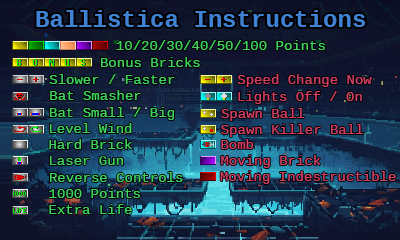
<style>
.page{position:relative;width:400px;height:240px}
.page>*{position:absolute;margin:0}
.t1{font:24px "LiterationMonoPowerline-Bold";color:#3f81d2}
.t2{font:14px "LiterationMonoPowerline";color:#3fd25e}
.t3{font:14px "LiterationMonoPowerline";color:#d23f65}
</style>
<div class="page">
<p class="t1" style="left:36px;top:10px;width:329px;height:17px">Ballistica Instructions</p>
<p class="t2" style="left:116px;top:40px;width:209px;height:10px">10/20/30/40/50/100 Points</p>
<p class="t2" style="left:101px;top:57px;width:99px;height:10px">Bonus Bricks</p>
<p class="t2" style="left:49px;top:74px;width:126px;height:10px">Slower / Faster</p>
<p class="t3" style="left:237px;top:74px;width:135px;height:13px">Speed Change Now</p>
<p class="t2" style="left:50px;top:90px;width:91px;height:10px">Bat Smasher</p>
<p class="t3" style="left:238px;top:91px;width:124px;height:13px">Lights Off / On</p>
<p class="t2" style="left:50px;top:107px;width:125px;height:13px">Bat Small / Big</p>
<p class="t3" style="left:221px;top:108px;width:84px;height:13px">Spawn Ball</p>
<p class="t2" style="left:50px;top:123px;width:82px;height:10px">Level Wind</p>
<p class="t3" style="left:221px;top:124px;width:142px;height:13px">Spawn Killer Ball</p>
<p class="t2" style="left:49px;top:139px;width:83px;height:10px">Hard Brick</p>
<p class="t3" style="left:221px;top:139px;width:33px;height:10px">Bomb</p>
<p class="t2" style="left:50px;top:156px;width:73px;height:9px">Laser Gun</p>
<p class="t3" style="left:221px;top:155px;width:100px;height:13px">Moving Brick</p>
<p class="t2" style="left:50px;top:172px;width:133px;height:10px">Reverse Controls</p>
<p class="t3" style="left:220px;top:171px;width:176px;height:13px">Moving Indestructible</p>
<p class="t2" style="left:49px;top:188px;width:91px;height:10px">1000 Points</p>
<p class="t2" style="left:49px;top:204px;width:83px;height:10px">Extra Life</p>
</div>
